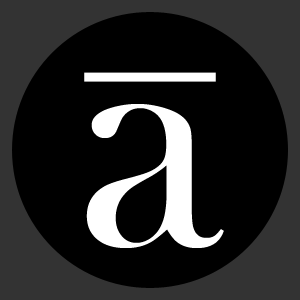
<style>
.page{position:relative;width:300px;height:300px;background:#000000}
.page>*{position:absolute;margin:0}
.t1{font:333.5px "BaskOldFace";color:#ffffff}
</style>
<div class="page">
<p class="t1" style="left:86px;top:104px;width:138px;height:144px">a</p>
</div>
